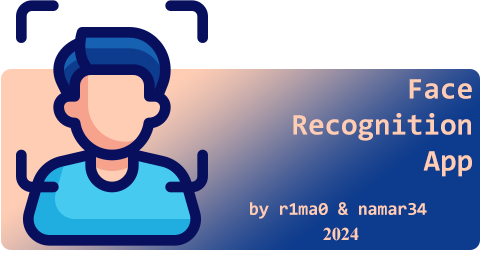
<style>
.page{position:relative;width:482px;height:256px;background:#ffffff}
.page>*{position:absolute;margin:0}
.t1{font:30px "Consolas-Bold";color:#ffcdb4}
.t2{font:18px "Consolas-Bold";color:#ffcdb4}
.t3{font:18px "TimesNewRomanPS-BoldMT";color:#ffcdb4}
</style>
<div class="page">
<p class="t1" style="left:293px;top:79px;width:179px;height:98px">Face <br>Recognition<br>App</p>
<p class="t2" style="left:250px;top:202px;width:177px;height:17px">by r1ma0 &amp; namar34</p>
<p class="t3" style="left:323px;top:227px;width:36px;height:14px">2024</p>
</div>
